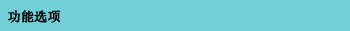
<style>
.page{position:relative;width:350px;height:31px;background:#72cfd7}
.page>*{position:absolute;margin:0}
.t1{font:13px "SimSun";color:#000000;font-weight:bold}
</style>
<div class="page">
<p class="t1" style="left:7px;top:10px;width:54px;height:13px">功能选项</p>
</div>
